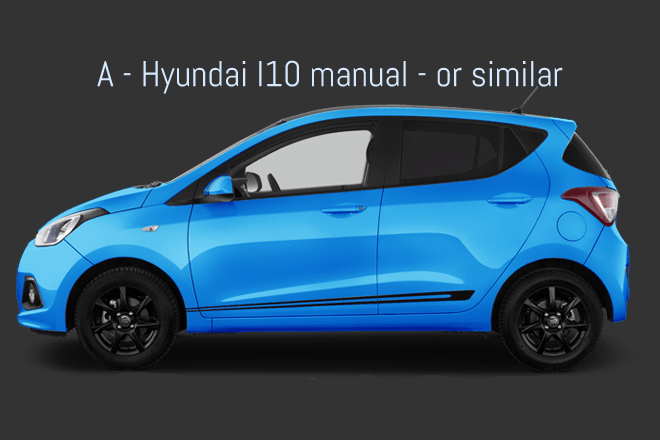
<style>
.page{position:relative;width:660px;height:440px;background:#333333}
.page>*{position:absolute;margin:0}
.t1{font:36px "Abel-Regular";color:#d5e9ff}
</style>
<div class="page">
<p class="t1" style="left:97px;top:60px;width:466px;height:34px">A - Hyundai I10 manual - or similar</p>
</div>
